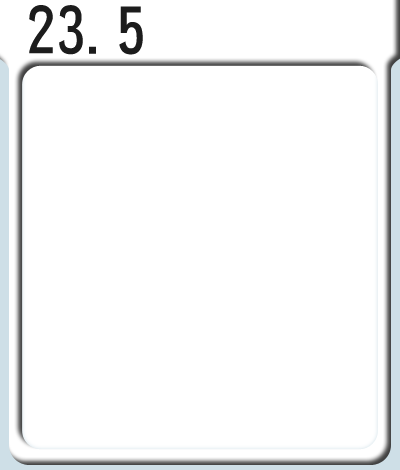
<style>
.page{position:relative;width:400px;height:470px;background:#ffffff}
.page>*{position:absolute;margin:0}
.t1{font:60px "DFHei-Bd-WIN-HK-BF";color:#1c1c1c}
</style>
<div class="page">
<p class="t1" style="left:29px;top:5px;width:114px;height:50px">23.5</p>
</div>
